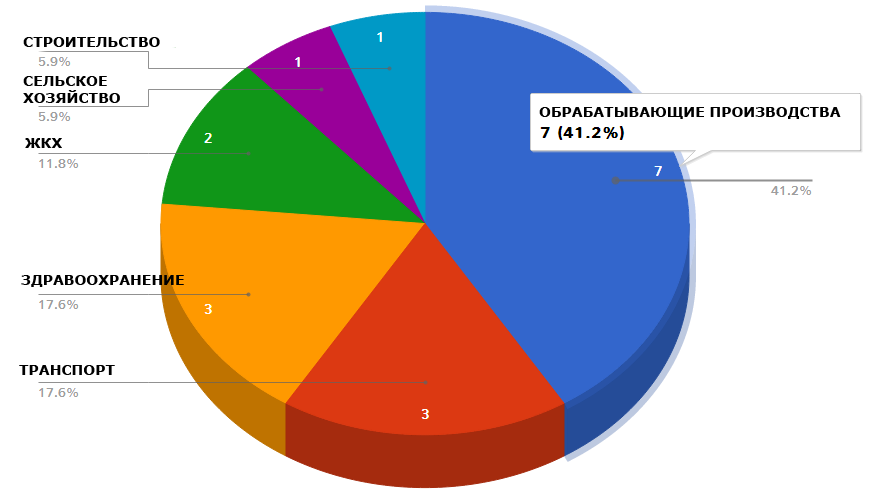
<style>
.page{position:relative;width:871px;height:500px;background:#ffffff}
.page>*{position:absolute;margin:0}
.t1{font:14px "Verdana-Bold";color:#000000}
</style>
<div class="page">
<p class="t1" style="left:23px;top:37px;width:137px;height:10px">СТРОИТЕЛЬСТВО</p>
<p class="t1" style="left:23px;top:76px;width:97px;height:27px">СЕЛЬСКОЕ<br>ХОЗЯЙСТВО</p>
<p class="t1" style="left:539px;top:107px;width:302px;height:12px">ОБРАБАТЫВАЮЩИЕ ПРОИЗВОДСТВА</p>
<p class="t1" style="left:25px;top:138px;width:37px;height:10px">ЖКХ</p>
<p class="t1" style="left:21px;top:275px;width:163px;height:12px">ЗДРАВООХРАНЕНИЕ</p>
<p class="t1" style="left:19px;top:365px;width:96px;height:10px">ТРАНСПОРТ</p>
</div>
